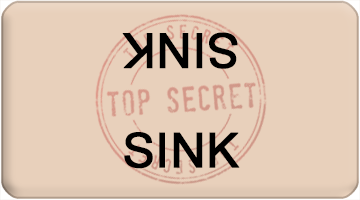
<style>
.page{position:relative;width:360px;height:200px;background:#e8d0bb}
.page>*{position:absolute;margin:0}
.t1{font:48px "ArialMT";color:#000000;font-weight:bold}
</style>
<div class="page">
<p class="t1" style="left:122px;top:32px;width:116px;height:37px;rotate:180deg">SINK</p>
<p class="t1" style="left:124px;top:132px;width:116px;height:37px">SINK</p>
</div>
